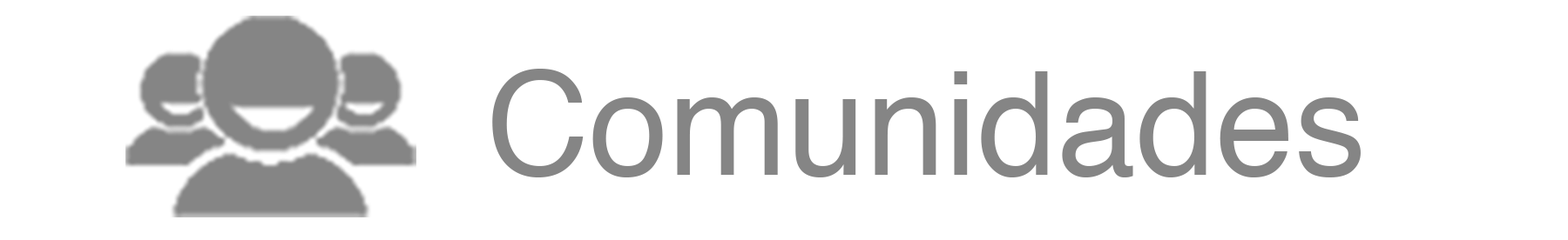
<style>
.page{position:relative;width:1568px;height:240px;background:#ffffff}
.page>*{position:absolute;margin:0}
.t1{font:144.1px "Helvetica";color:#858585}
</style>
<div class="page">
<p class="t1" style="left:492px;top:69px;width:869px;height:109px">Comunidades</p>
</div>
